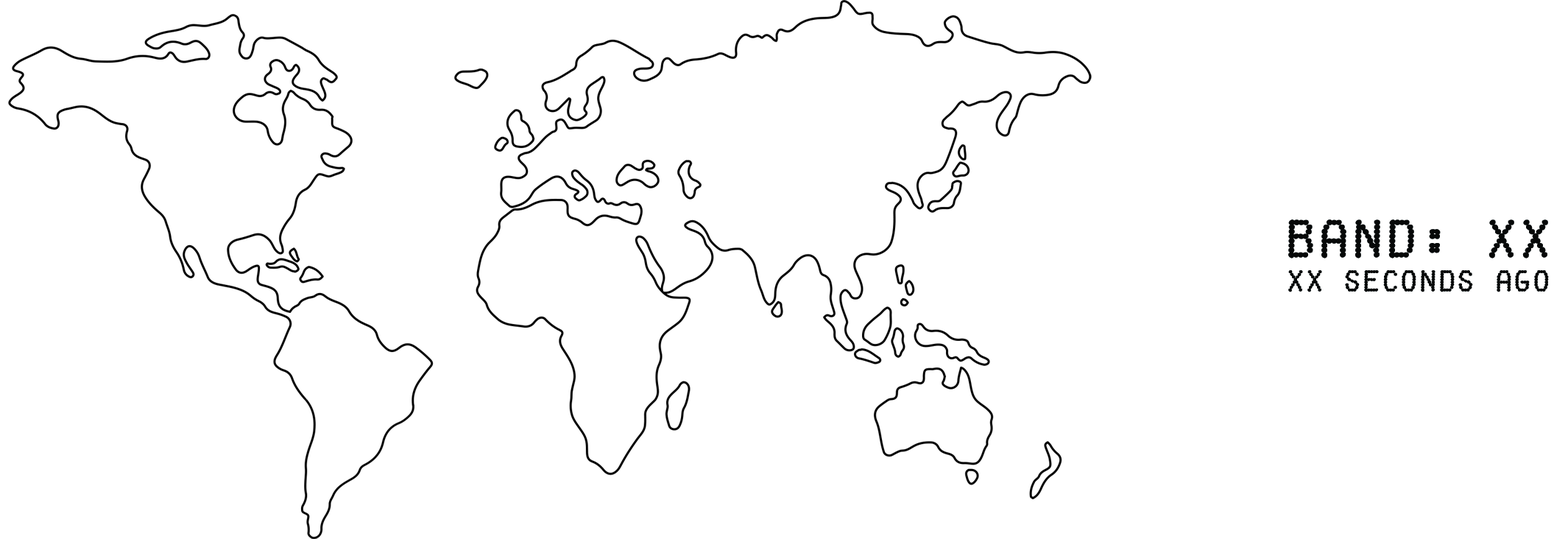
<style>
.page{position:relative;width:1568px;height:539px;background:#ffffff}
.page>*{position:absolute;margin:0}
.t1{font:49.7px "FakeReceipt-Regular";color:#060808}
.t2{font:28px "FakeReceipt-Regular";color:#060808}
</style>
<div class="page">
<p class="t1" style="left:1288px;top:219px;width:260px;height:39px">Band: XX</p>
<p class="t2" style="left:1288px;top:270px;width:261px;height:22px">XX Seconds AGO</p>
</div>
